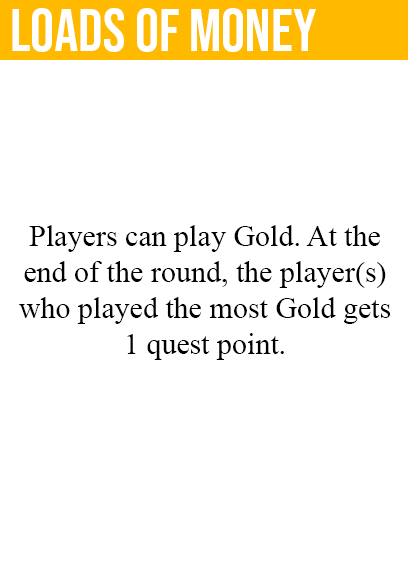
<style>
.page{position:relative;width:408px;height:585px;background:#ffffff}
.page>*{position:absolute;margin:0}
.t1{font:60px "BebasNeue-Regular";color:#ffffff}
.t2{font:30px "TimesNewRomanPSMT";color:#000000}
</style>
<div class="page">
<p class="t1" style="left:12px;top:8px;width:304px;height:44px">loads of money</p>
<p class="t2" style="left:19px;top:225px;width:372px;height:135px;text-align:center">Players can play Gold. At the<br>end of the round, the player(s)<br>who played the most Gold gets<br>1 quest point.</p>
</div>
